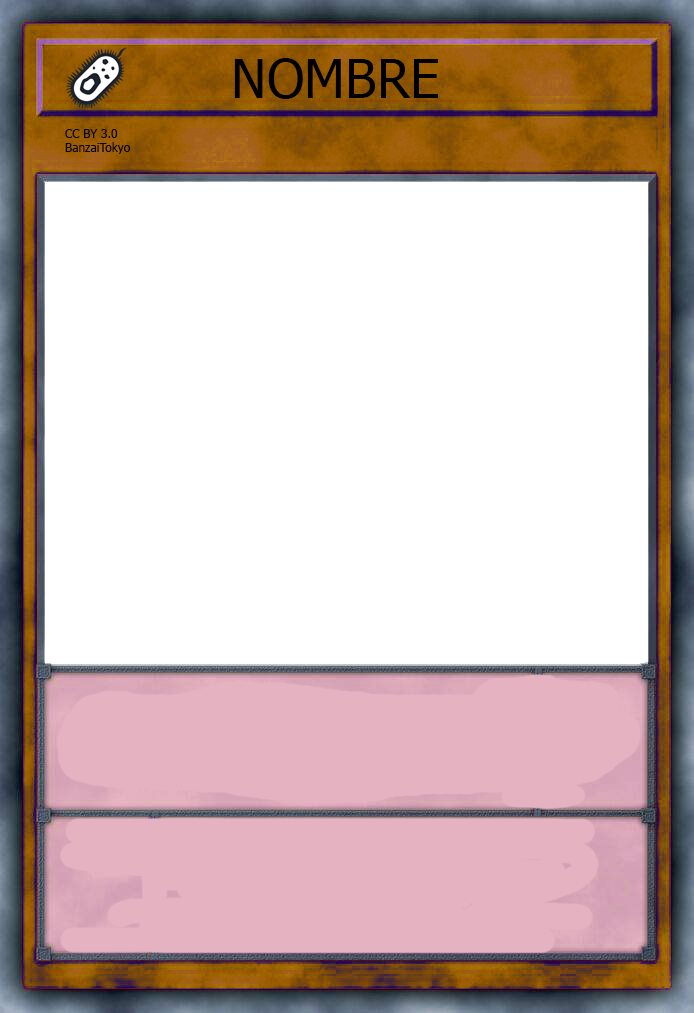
<style>
.page{position:relative;width:694px;height:1013px;background:#ffffff}
.page>*{position:absolute;margin:0}
.t1{font:53.8px "Tahoma";color:#000000}
.t2{font:12px "Tahoma";color:#000000}
</style>
<div class="page">
<p class="t1" style="left:234px;top:58px;width:204px;height:41px">NOMBRE</p>
<p class="t2" style="left:65px;top:129px;width:65px;height:25px">CC BY 3.0<br>BanzaiTokyo</p>
</div>
